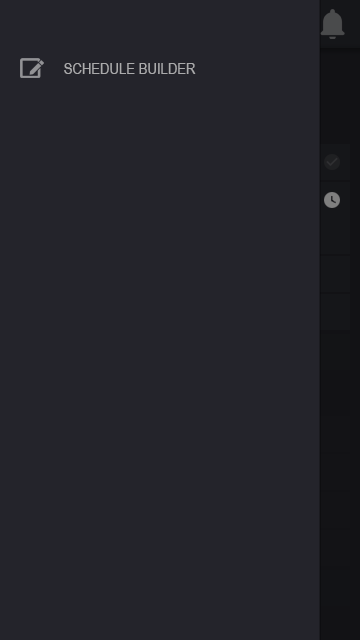
<style>
.page{position:relative;width:360px;height:640px;background:#24242b}
.page>*{position:absolute;margin:0}
.t1{font:16px "ArialNarrow";color:#aaaaab}
</style>
<div class="page">
<p class="t1" style="left:64px;top:63px;width:132px;height:11px">SCHEDULE BUILDER</p>
</div>
